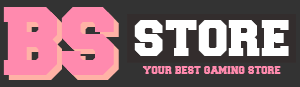
<style>
.page{position:relative;width:300px;height:87px;background:#333333}
.page>*{position:absolute;margin:0}
.t1{font:82px "Freshman";color:#ff8aae}
.t2{font:54.3px "Freshman";color:#ffffff}
.t3{font:11.3px "Freshman";color:#ff8aae}
</style>
<div class="page">
<p class="t1" style="left:3px;top:7px;width:111px;height:68px">BS</p>
<p class="t1" style="left:8px;top:12px;width:111px;height:68px">BS</p>
<p class="t2" style="left:134px;top:20px;width:155px;height:36px">store</p>
<p class="t3" style="left:142px;top:66px;width:139px;height:8px">your best gaming store</p>
</div>
